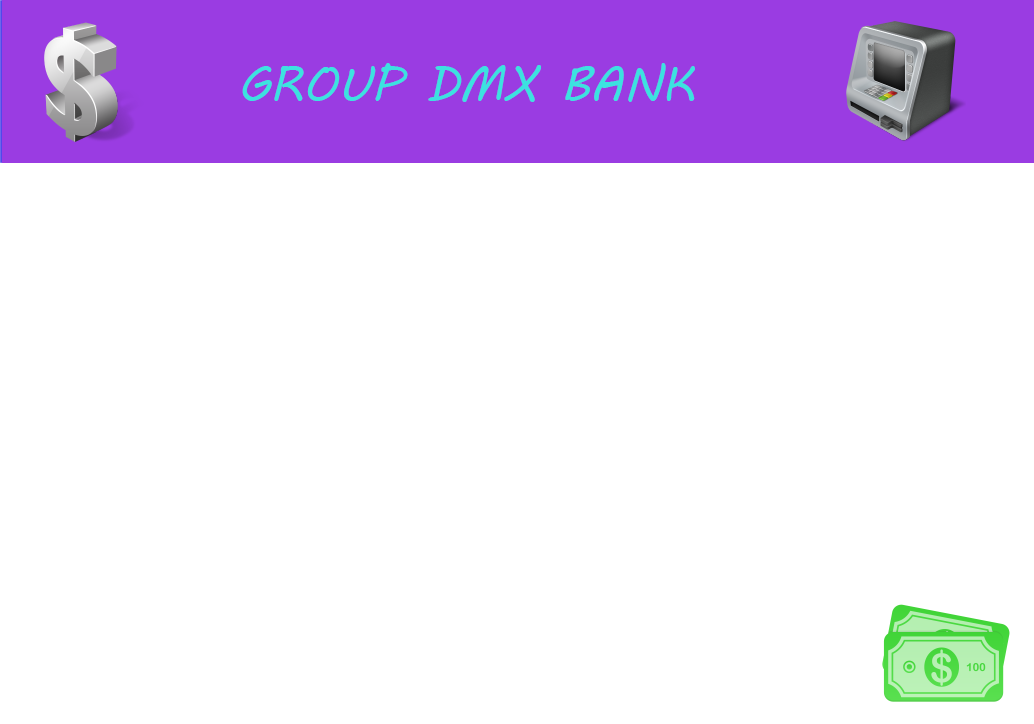
<style>
.page{position:relative;width:1034px;height:724px;background:#ffffff}
.page>*{position:absolute;margin:0}
.t1{font:48px "MVBoli";color:#3ce2e0}
</style>
<div class="page">
<p class="t1" style="left:242px;top:63px;width:453px;height:39px">GROUP DMX BANK</p>
</div>
